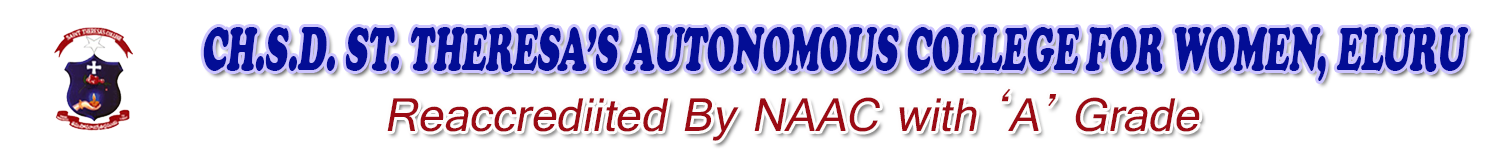
<style>
.page{position:relative;width:1500px;height:150px;background:#ffffff}
.page>*{position:absolute;margin:0}
.t1{font:62.5px "CooperBlack";color:#030d95;font-style:italic;scale:0.56 1}
.t2{font:83.3px "MyriadPro-Regular";color:#030d95;scale:0.56 1}
.t3{font:51px "Raavi";color:#9b0b14;font-style:italic}
</style>
<div class="page">
<p class="t1" style="left:203px;top:27px;width:1265px;height:54px"><span class="t2"> </span>CH.S.D. ST. THERESA’S AUTONOMOUS COLLEGE FOR WOMEN, ELURU</p>
<p class="t3" style="left:387px;top:88px;width:813px;height:53px">Reaccrediited By NAAC with ‘A’ Grade</p>
</div>
